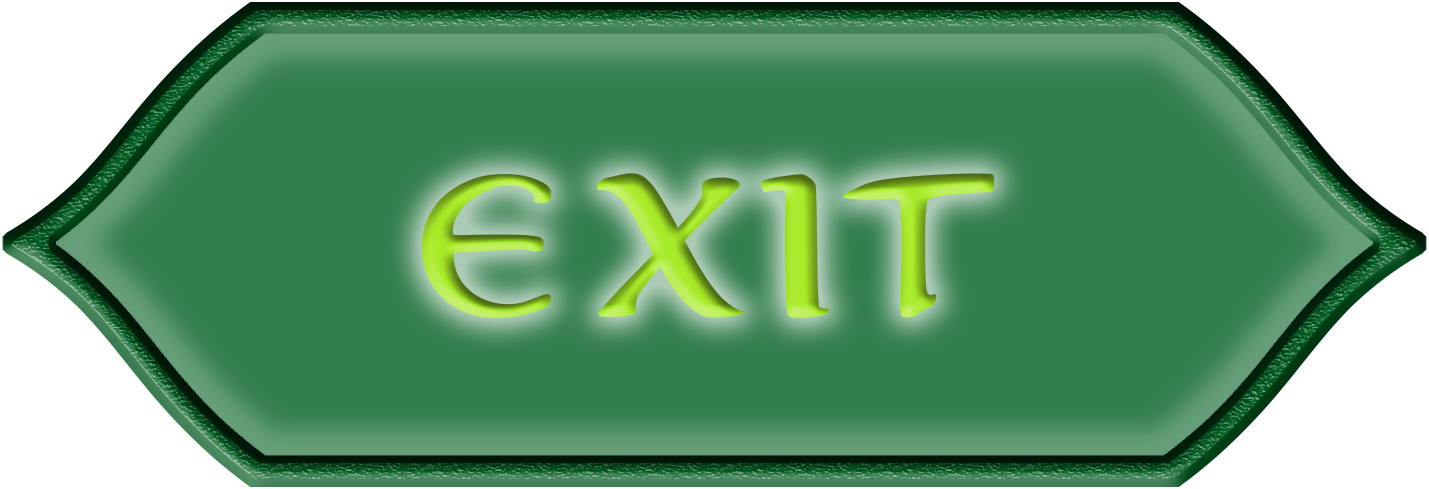
<style>
.page{position:relative;width:1429px;height:489px;background:#337e4d}
.page>*{position:absolute;margin:0}
.t1{font:200px "MiddleEarth"}
</style>
<div class="page">
<p class="t1" style="left:422px;top:173px;width:573px;height:145px">EXIT</p>
</div>
